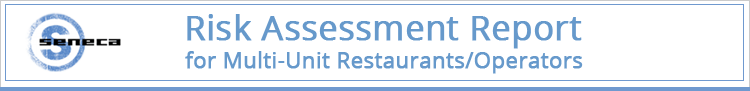
<style>
.page{position:relative;width:750px;height:91px;background:#ffffff}
.page>*{position:absolute;margin:0}
.t1{font:34px "OpenSans";color:#6699cc;font-weight:bold}
.t2{font:22px "OpenSans";letter-spacing:-0.003em;color:#6699cc;font-weight:bold}
</style>
<div class="page">
<p class="t1" style="left:187px;top:14px;width:395px;height:35px">Risk Assessment Report</p>
<p class="t2" style="left:185px;top:51px;width:398px;height:23px">for Multi-Unit Restaurants/Operators</p>
</div>
